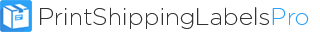
<style>
.page{position:relative;width:320px;height:32px;background:#ffffff}
.page>*{position:absolute;margin:0}
.t1{font:24px "Gotham-ExtraLight";color:#333333}
.t2{font:24px "Gotham-ExtraLight";color:#2ca3fa}
</style>
<div class="page">
<p class="t1" style="left:40px;top:7px;width:269px;height:22px">PrintShippingLabels<span class="t2">Pro</span></p>
</div>
